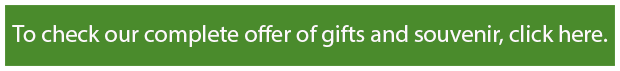
<style>
.page{position:relative;width:620px;height:71px;background:#4a8b2c}
.page>*{position:absolute;margin:0}
.t1{font:24px "MingLiU";color:#fdf9fb}
</style>
<div class="page">
<p class="t1" style="left:12px;top:25px;width:596px;height:22px">To check our complete offer of gifts and souvenir, click here.</p>
</div>
